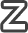
<style>
.page{position:relative;width:28px;height:33px;background:#ffffff}
.page>*{position:absolute;margin:0}
.t1{font:36px "OpenDyslexic-Regular";color:#ffffff}
</style>
<div class="page">
<p class="t1" style="left:3px;top:3px;width:22px;height:27px">Z</p>
</div>
